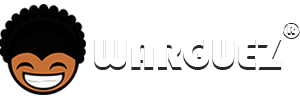
<style>
.page{position:relative;width:300px;height:100px;background:#ffffff}
.page>*{position:absolute;margin:0}
.t1{font:24px "Bauhaus93"}
.t2{font:24px "Bauhaus93";color:#fefefe}
.t3{font:45px "Bauhaus93";color:#ffffff}
</style>
<div class="page">
<p class="t1" style="left:283px;top:23px;width:17px;height:16px">®</p>
<p class="t2" style="left:283px;top:21px;width:17px;height:16px">®</p>
<p class="t3" style="left:94px;top:37px;width:188px;height:30px">WARGUEZ</p>
</div>
